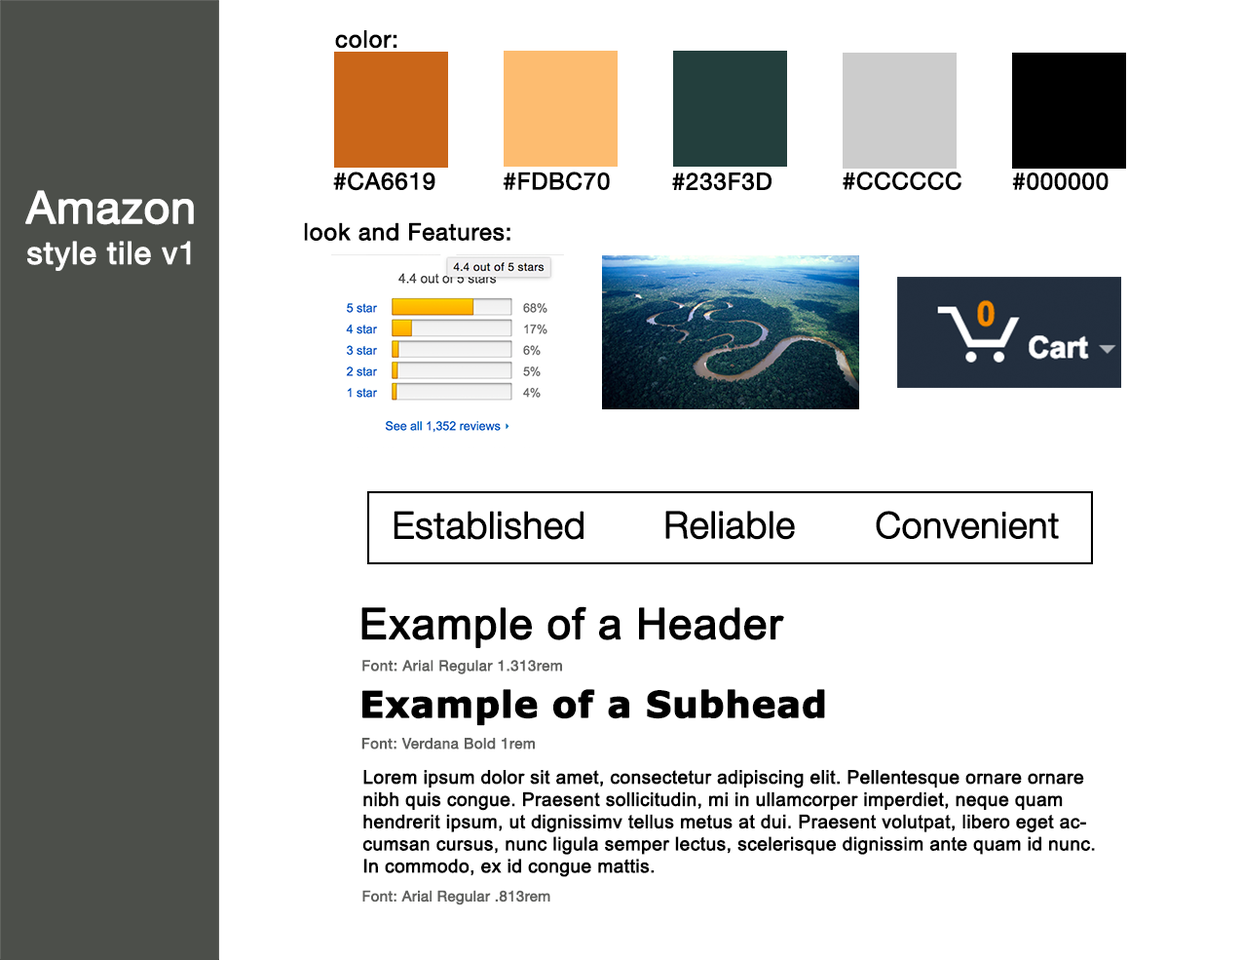
<style>
.page{position:relative;width:1242px;height:960px;background:#ffffff}
.page>*{position:absolute;margin:0}
.t1{font:23.4px "HelveticaNeue";letter-spacing:0.01em;color:#000000;font-weight:bold}
.t2{font:44.8px "HelveticaNeue";color:#ffffff;font-weight:bold}
.t3{font:46.8px "HelveticaNeue";color:#ffffff;font-weight:bold}
.t4{font:31.2px "HelveticaNeue";letter-spacing:0.01em;color:#ffffff;font-weight:bold}
.t5{font:37px "HelveticaNeue-Light";color:#000000;font-weight:bold}
.t6{font:36.1px "HelveticaNeue-Light";color:#000000;font-weight:bold}
.t7{font:42.9px "ArialMT";color:#000000;font-weight:bold}
.t8{font:14.6px "HelveticaNeue";letter-spacing:0.01em;color:#5f605e;font-weight:bold}
.t9{font:36.1px "Verdana-Bold";color:#000000;font-weight:bold}
.t10{font:18.5px "ArialMT";color:#000000;font-weight:bold}
.t11{font:14.6px "HelveticaNeue";color:#5f605e;font-weight:bold}
</style>
<div class="page">
<p class="t1" style="left:335px;top:30px;width:63px;height:19px">color:</p>
<p class="t1" style="left:333px;top:171px;width:103px;height:20px">#CA6619</p>
<p class="t1" style="left:503px;top:171px;width:107px;height:20px">#FDBC70</p>
<p class="t1" style="left:672px;top:172px;width:100px;height:19px">#233F3D</p>
<p class="t1" style="left:843px;top:171px;width:119px;height:19px">#CCCCCC</p>
<p class="t1" style="left:1012px;top:172px;width:97px;height:18px">#000000</p>
<p class="t2" style="left:25px;top:190px;width:169px;height:35px"><span class="t3"><br></span>Amazon</p>
<p class="t1" style="left:304px;top:222px;width:207px;height:19px">look and Features:</p>
<p class="t4" style="left:27px;top:241px;width:164px;height:30px">style tile v1</p>
<p class="t5" style="left:394px;top:511px;width:190px;height:29px">Established</p>
<p class="t5" style="left:666px;top:511px;width:129px;height:29px">Reliable</p>
<p class="t6" style="left:876px;top:511px;width:183px;height:28px">Convenient</p>
<p class="t7" style="left:362px;top:606px;width:422px;height:42px">Example of a Header</p>
<p class="t8" style="left:362px;top:660px;width:200px;height:14px">Font: Arial Regular 1.313rem</p>
<p class="t9" style="left:362px;top:689px;width:463px;height:37px">Example of a Subhead</p>
<p class="t8" style="left:362px;top:738px;width:173px;height:11px">Font: Verdana Bold 1rem</p>
<p class="t10" style="left:362px;top:770px;width:733px;height:107px">Lorem ipsum dolor sit amet, consectetur adipiscing elit. Pellentesque ornare ornare nibh quis congue. Praesent sollicitudin, mi in ullamcorper imperdiet, neque quam hendrerit ipsum, ut dignissimv tellus metus at dui. Praesent volutpat, libero eget accumsan cursus, nunc ligula semper lectus, scelerisque dignissim ante quam id nunc. In commodo, ex id congue mattis.</p>
<p class="t11" style="left:362px;top:890px;width:189px;height:15px">Font: Arial Regular .813rem</p>
</div>
